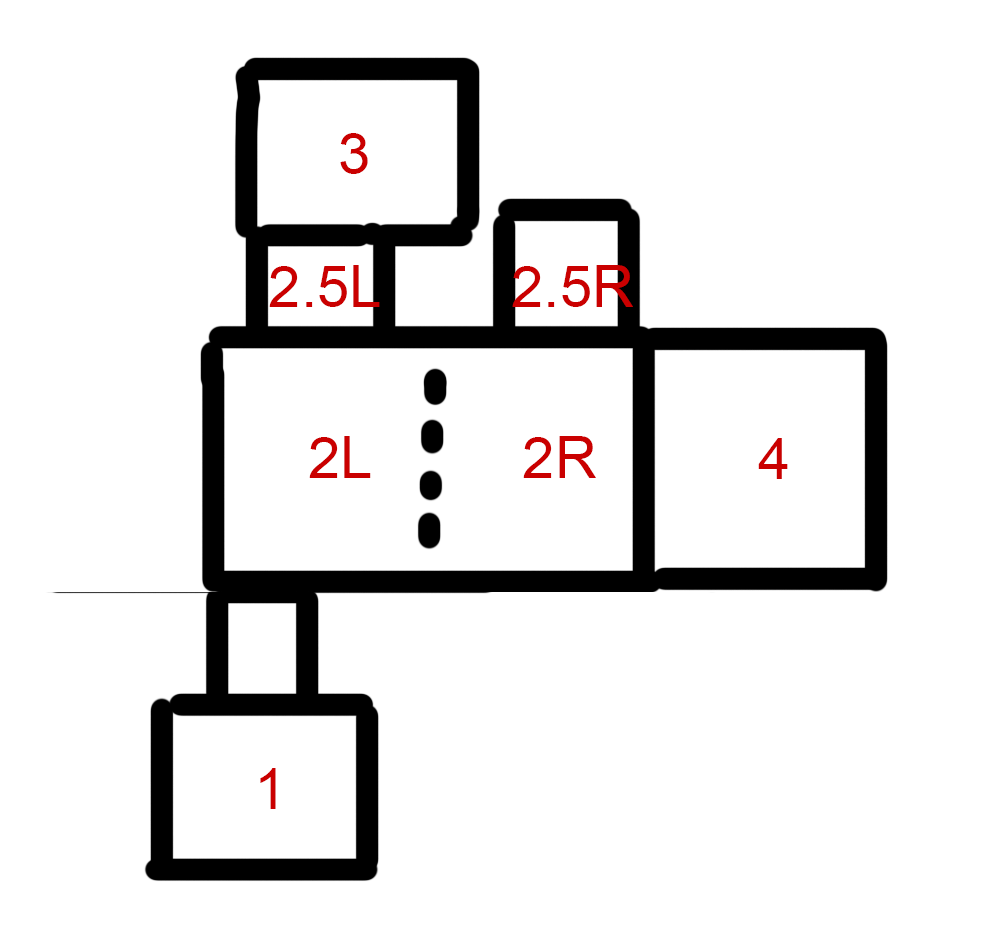
<style>
.page{position:relative;width:1000px;height:939px;background:#ffffff}
.page>*{position:absolute;margin:0}
.t1{font:58.3px "ArialMT";color:#ca0000}
</style>
<div class="page">
<p class="t1" style="left:340px;top:133px;width:28px;height:41px">3</p>
<p class="t1" style="left:269px;top:265px;width:111px;height:42px">2.5L</p>
<p class="t1" style="left:512px;top:265px;width:121px;height:42px">2.5R</p>
<p class="t1" style="left:309px;top:436px;width:62px;height:42px">2L</p>
<p class="t1" style="left:523px;top:436px;width:73px;height:42px">2R</p>
<p class="t1" style="left:758px;top:438px;width:30px;height:41px">4</p>
<p class="t1" style="left:260px;top:768px;width:16px;height:41px">1</p>
</div>
